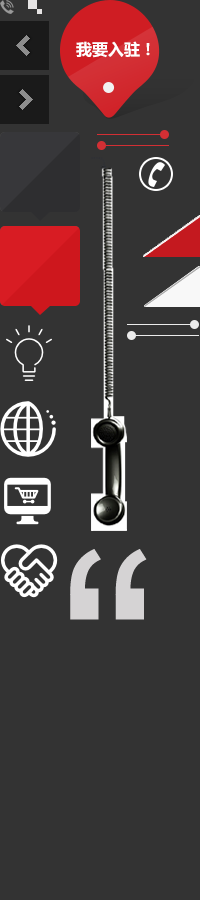
<style>
.page{position:relative;width:200px;height:900px;background:#333333}
.page>*{position:absolute;margin:0}
.t1{font:16px "MicrosoftYaHei-Bold";color:#ffffff;text-transform:uppercase}
.t2{font:300.2px "ArialMT";color:#d5d3d4;text-transform:uppercase}
</style>
<div class="page">
<p class="t1" style="left:76px;top:41px;width:74px;height:17px">我要入驻！</p>
<p class="t2" style="left:70px;top:549px;width:77px;height:71px">“</p>
</div>
